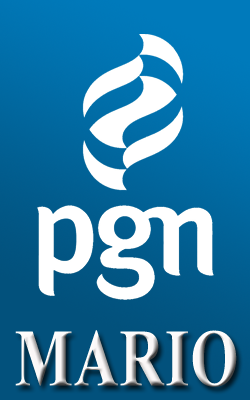
<style>
.page{position:relative;width:250px;height:400px}
.page>*{position:absolute;margin:0}
.t1{font:81px "TimesNewRomanPS-BoldMT";font-weight:bold;scale:0.75 1}
</style>
<div class="page">
<p class="t1" style="left:15px;top:330px;width:222px;height:57px">MARIO</p>
</div>
